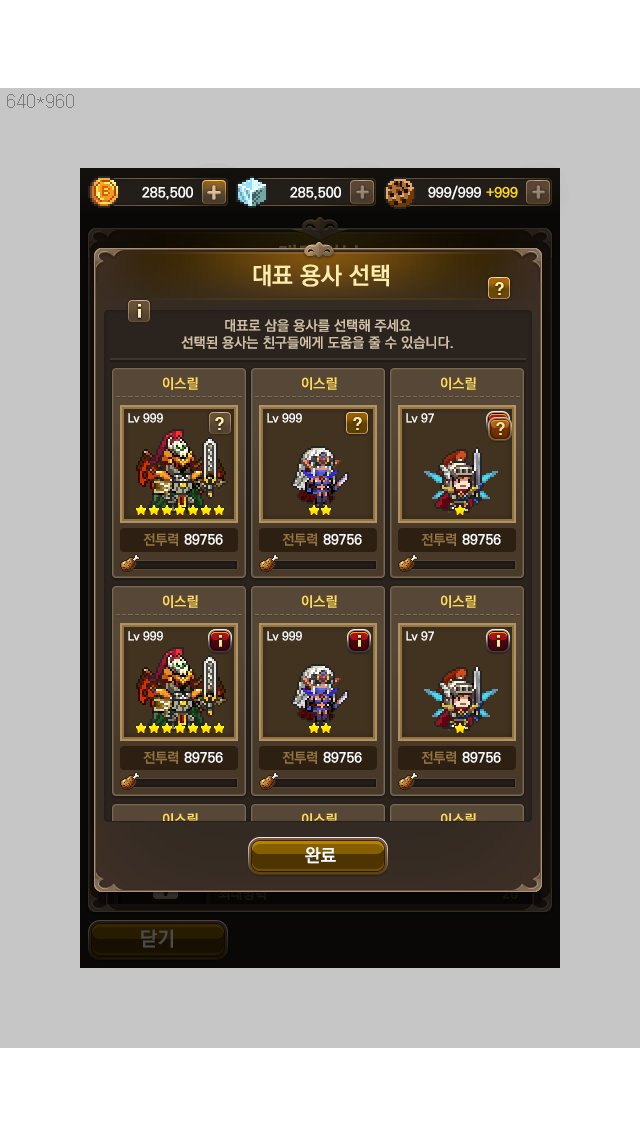
<style>
.page{position:relative;width:640px;height:1136px;background:#c6c6c6}
.page>*{position:absolute;margin:0}
.t1{font:24px "KoPubDotumBold";color:#ffedab}
.t2{font:16px "H2gtrE";color:#ffeeb0}
.t3{font:14px "KoPubDotumBold";color:#d0c0a6}
.t4{font:14px "KoPubDotumBold";color:#ffda5a}
.t5{font:12px "KoPubDotumBold";color:#ffffff}
.t6{font:16px "H2gtrE";color:#f7e58a}
.t7{font:14px "KoPubDotumBold";color:#937441}
.t8{font:14px "KoPubDotumBold";color:#ffffff}
.t9{font:18px "KoPubDotumBold";color:#ffffff}
</style>
<div class="page">
<p class="t1" style="left:253px;top:264px;width:136px;height:23px">대표 용사 선택</p>
<p class="t2" style="left:495px;top:282px;width:9px;height:13px">?</p>
<p class="t3" style="left:181px;top:319px;width:272px;height:30px;text-align:center">대표로 삼을 용사를 선택해 주세요<br>선택된 용사는 친구들에게 도움을 줄 수 있습니다.</p>
<p class="t4" style="left:163px;top:377px;width:35px;height:13px">이스릴</p>
<p class="t4" style="left:302px;top:377px;width:35px;height:13px">이스릴</p>
<p class="t4" style="left:441px;top:377px;width:35px;height:13px">이스릴</p>
<p class="t5" style="left:128px;top:413px;width:35px;height:10px">Lv 999</p>
<p class="t5" style="left:267px;top:413px;width:35px;height:10px">Lv 999</p>
<p class="t5" style="left:406px;top:413px;width:28px;height:10px">Lv 97</p>
<p class="t2" style="left:215px;top:417px;width:9px;height:13px">?</p>
<p class="t2" style="left:353px;top:417px;width:9px;height:13px">?</p>
<p class="t6" style="left:496px;top:422px;width:9px;height:13px">?</p>
<p class="t7" style="left:143px;top:533px;width:35px;height:13px">전투력</p>
<p class="t8" style="left:184px;top:533px;width:39px;height:12px">89756</p>
<p class="t7" style="left:282px;top:533px;width:35px;height:13px">전투력</p>
<p class="t8" style="left:323px;top:533px;width:39px;height:12px">89756</p>
<p class="t7" style="left:421px;top:533px;width:35px;height:13px">전투력</p>
<p class="t8" style="left:462px;top:533px;width:39px;height:12px">89756</p>
<p class="t9" style="left:305px;top:847px;width:31px;height:17px">완료</p>
</div>
